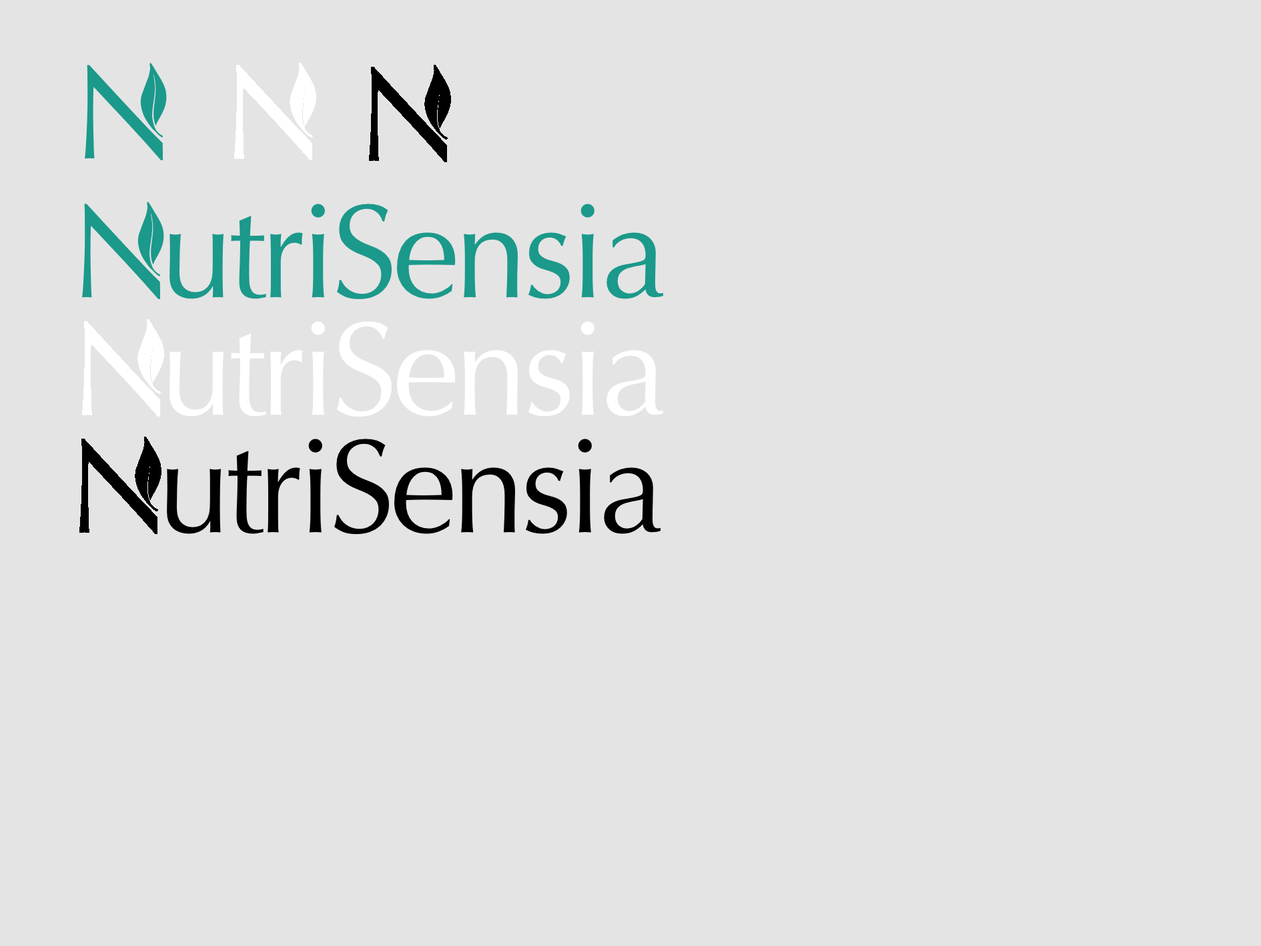
<style>
.page{position:relative;width:1261px;height:946px;background:#e4e4e4}
.page>*{position:absolute;margin:0}
.t1{font:133.5px "Optima-Regular";letter-spacing:-0.04em;color:#1b998b}
.t2{font:133.5px "Optima-Regular";letter-spacing:-0.04em;color:#ffffff}
.t3{font:133.5px "Optima-Regular";letter-spacing:-0.04em;color:#000000}
</style>
<div class="page">
<p class="t1" style="left:169px;top:204px;width:494px;height:95px">utriSensia</p>
<p class="t2" style="left:169px;top:321px;width:494px;height:95px">utriSensia</p>
<p class="t3" style="left:167px;top:438px;width:494px;height:96px">utriSensia</p>
</div>
